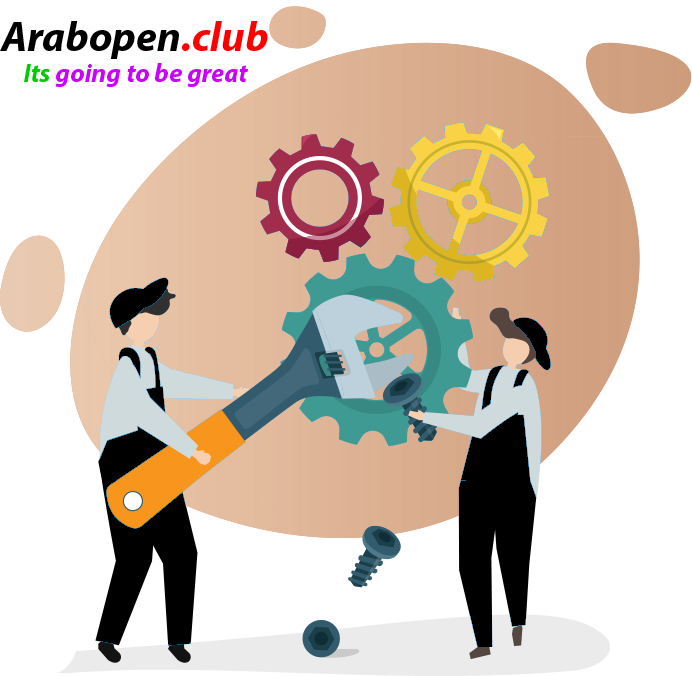
<style>
.page{position:relative;width:692px;height:676px;background:#ffffff}
.page>*{position:absolute;margin:0}
.t1{font:26px "MyriadPro-BoldIt";color:#cc00ff}
.t2{font:42px "MyriadPro-BoldIt";color:#000000}
.t3{font:42px "MyriadPro-BoldIt";color:#ff0000}
.t4{font:26px "MyriadPro-BoldIt";color:#00cc00}
</style>
<div class="page">
<p class="t1" style="left:0px;top:21px;width:268px;height:66px"><span class="t2">Arabopen</span><span class="t3">.club<br></span><span class="t4">Its </span>going to be great</p>
</div>
